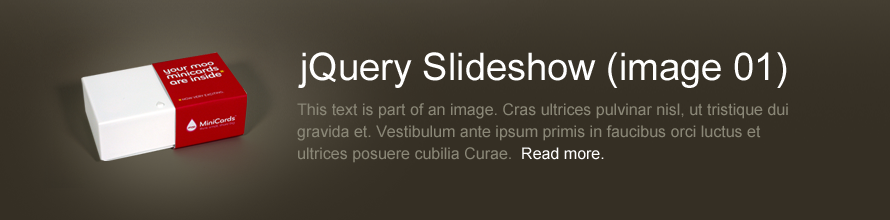
<style>
.page{position:relative;width:890px;height:220px;background:#352f24}
.page>*{position:absolute;margin:0}
.t1{font:38px "ArialMT";color:#ffffff}
.t2{font:16px/22px "ArialMT";color:#8a8777}
.t3{font:16px/22px "ArialMT";color:#ffffff}
</style>
<div class="page">
<p class="t1" style="left:298px;top:52px;width:489px;height:36px">jQuery Slideshow (image 01)</p>
<p class="t2" style="left:297px;top:103px;width:491px;height:60px">This text is part of an image. Cras ultrices pulvinar nisl, ut tristique dui gravida et. Vestibulum ante ipsum primis in faucibus orci luctus et ultrices posuere cubilia Curae.  <span class="t3">Read more.</span></p>
</div>
